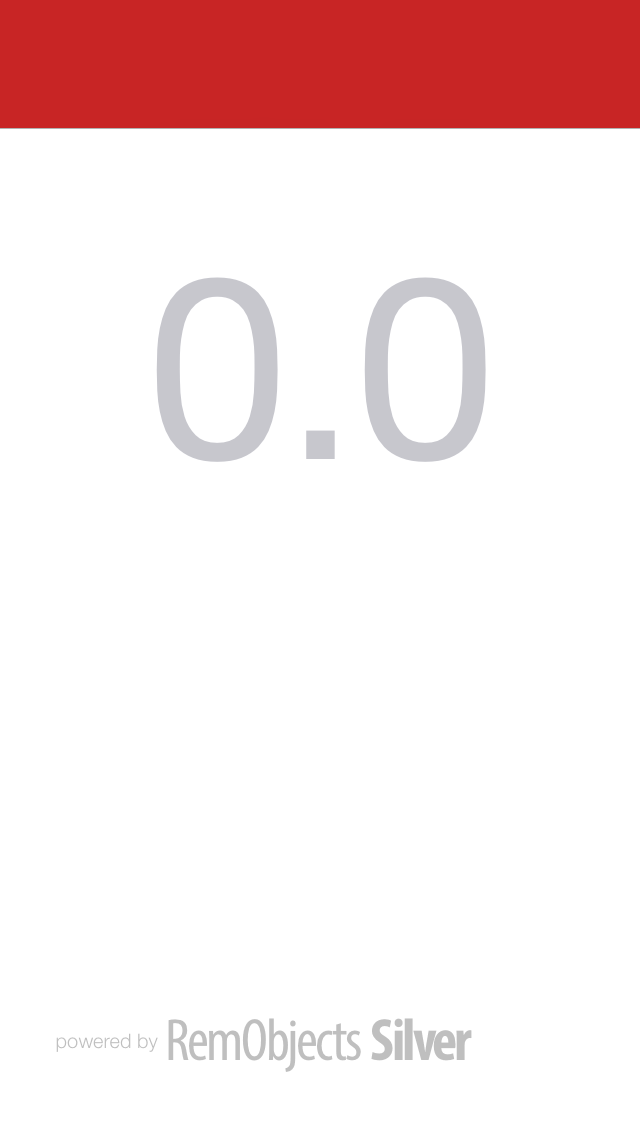
<style>
.page{position:relative;width:640px;height:1136px;background:#ffffff}
.page>*{position:absolute;margin:0}
.t1{font:60px "MyriadPro-Cond";letter-spacing:-0.04em;color:#bfbfbf}
.t2{font:60px "MyriadPro-BoldCond";letter-spacing:-0.06em;color:#bfbfbf}
.t3{font:20px "HelveticaNeue-Light";color:#bfbfbf}
</style>
<div class="page">
<p class="t1" style="left:168px;top:1018px;width:304px;height:54px">RemObjects <span class="t2">Silver</span></p>
<p class="t3" style="left:56px;top:1033px;width:102px;height:19px">powered by</p>
</div>
